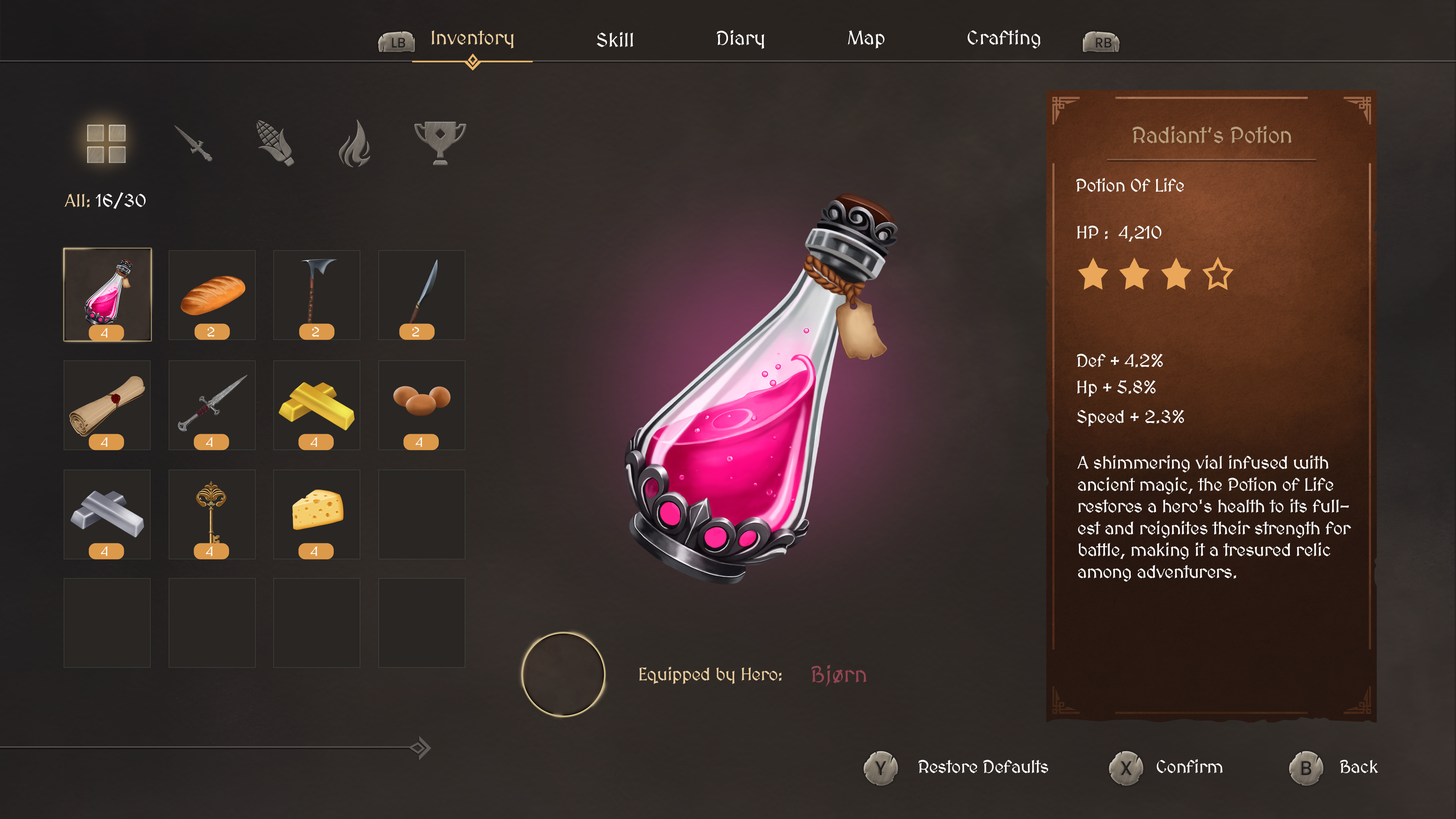
<style>
.page{position:relative;width:1456px;height:819px}
.page>*{position:absolute;margin:0}
.t1{font:19.8px "MedievalSharp";color:#ffffff}
.t2{font:19.8px "MedievalSharp";color:#ecce9f}
.t3{font:22.7px "MedievalSharp";letter-spacing:-0.02em;color:#b79f7b}
.t4{font:18.2px "MedievalSharp";letter-spacing:-0.02em;color:#ffffff}
.t5{font:18.2px "MedievalSharp";color:#ffffff}
.t6{font:18.2px "MedievalSharp";color:#ecce9f}
.t7{font:13.6px "MedievalSharp";color:#ffffff}
.t8{font:22.7px "MedievalSharp";color:#924552}
.t9{font:18.2px "MedievalSharp";letter-spacing:-0.02em;color:#ecce9f}
</style>
<div class="page">
<p class="t1" style="left:717px;top:30px;width:47px;height:19px">Diary</p>
<p class="t1" style="left:968px;top:30px;width:72px;height:19px">Crafting</p>
<p class="t2" style="left:431px;top:30px;width:83px;height:19px">Inventory</p>
<p class="t1" style="left:597px;top:32px;width:36px;height:15px">Skill</p>
<p class="t1" style="left:848px;top:30px;width:37px;height:19px">Map</p>
<p class="t3" style="left:1132px;top:126px;width:159px;height:17px">Radiant’s Potion</p>
<p class="t4" style="left:1076px;top:178px;width:108px;height:14px">Potion Of Life</p>
<p class="t5" style="left:64px;top:192px;width:82px;height:17px"><span class="t6">All:</span> 16/30</p>
<p class="t4" style="left:1077px;top:226px;width:84px;height:16px">HP :  4,210</p>
<p class="t7" style="left:101px;top:328px;width:7px;height:10px">4</p>
<p class="t7" style="left:207px;top:327px;width:8px;height:10px">2</p>
<p class="t7" style="left:312px;top:327px;width:7px;height:10px">2</p>
<p class="t7" style="left:412px;top:327px;width:7px;height:10px">2</p>
<p class="t4" style="left:1077px;top:354px;width:86px;height:14px">Def + 4.2%</p>
<p class="t4" style="left:1077px;top:380px;width:79px;height:17px">Hp + 5.8%</p>
<p class="t4" style="left:1077px;top:410px;width:107px;height:17px">Speed + 2.3%</p>
<p class="t7" style="left:101px;top:437px;width:7px;height:10px">4</p>
<p class="t7" style="left:206px;top:437px;width:7px;height:10px">4</p>
<p class="t7" style="left:311px;top:437px;width:6px;height:10px">4</p>
<p class="t7" style="left:416px;top:437px;width:6px;height:10px">4</p>
<p class="t4" style="left:1077px;top:455px;width:274px;height:127px">A shimmering vial infused with ancient magic, the Potion of Life restores a hero's health to its fullest and reignites their strength for battle, making it a tresured relic among adventurers.</p>
<p class="t7" style="left:101px;top:546px;width:7px;height:10px">4</p>
<p class="t7" style="left:206px;top:546px;width:7px;height:10px">4</p>
<p class="t7" style="left:311px;top:546px;width:6px;height:10px">4</p>
<p class="t8" style="left:811px;top:665px;width:55px;height:22px">Bjørn</p>
<p class="t9" style="left:639px;top:667px;width:142px;height:17px">Equipped by Hero:</p>
<p class="t4" style="left:918px;top:760px;width:130px;height:13px">Restore Defaults</p>
<p class="t4" style="left:1156px;top:759px;width:67px;height:14px">Confirm</p>
<p class="t4" style="left:1340px;top:760px;width:38px;height:13px">Back</p>
</div>
